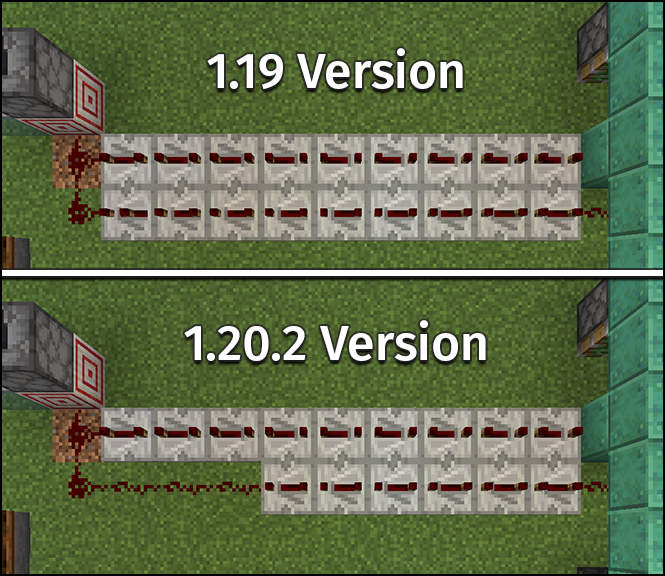
<style>
.page{position:relative;width:665px;height:576px}
.page>*{position:absolute;margin:0}
.t1{font:50px "FiraSans-Medium";color:#ffffff}
</style>
<div class="page">
<p class="t1" style="left:207px;top:48px;width:256px;height:41px">1.19 Version</p>
<p class="t1" style="left:184px;top:320px;width:302px;height:41px">1.20.2 Version</p>
</div>
